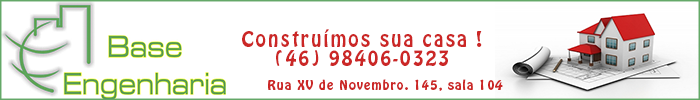
<style>
.page{position:relative;width:700px;height:100px;background:#ffffff}
.page>*{position:absolute;margin:0}
.t1{font:19px/19px "HoboStd";letter-spacing:0.1em;color:#cb2726}
.t2{font:12px "HoboStd";letter-spacing:0.1em;color:#cb2726}
</style>
<div class="page">
<p class="t1" style="left:242px;top:29px;width:240px;height:37px;text-align:center">Construímos sua casa !<br>(46) 98406-0323</p>
<p class="t2" style="left:268px;top:79px;width:235px;height:12px">Rua XV de Novembro. 145, sala 104</p>
</div>
